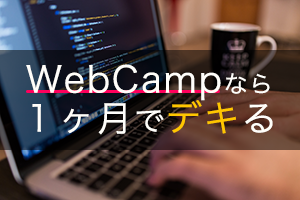
<style>
.page{position:relative;width:300px;height:200px}
.page>*{position:absolute;margin:0}
.t1{font:36px "HiraKakuPro-W3";letter-spacing:0.05em;color:#fffefa}
.t2{font:24px "HiraKakuPro-W3";letter-spacing:0.05em;color:#fffefa}
.t3{font:30px "HiraKakuPro-W3";letter-spacing:0.05em;color:#fffefa}
.t4{font:36px "HiraKakuPro-W3";letter-spacing:0.05em;color:#ffc600}
</style>
<div class="page">
<p class="t1" style="left:26px;top:64px;width:244px;height:37px">WebCamp<span class="t2">なら</span></p>
<p class="t1" style="left:32px;top:100px;width:241px;height:35px">１ヶ月<span class="t3">で</span><span class="t4">デキ</span>る</p>
</div>
